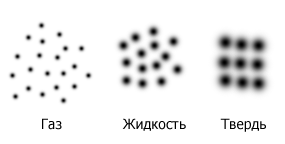
<style>
.page{position:relative;width:285px;height:144px;background:#ffffff}
.page>*{position:absolute;margin:0}
.t1{font:14px "Tahoma";color:#000000}
</style>
<div class="page">
<p class="t1" style="left:42px;top:118px;width:224px;height:14px">Газ              Жидкость        Твердь</p>
</div>
